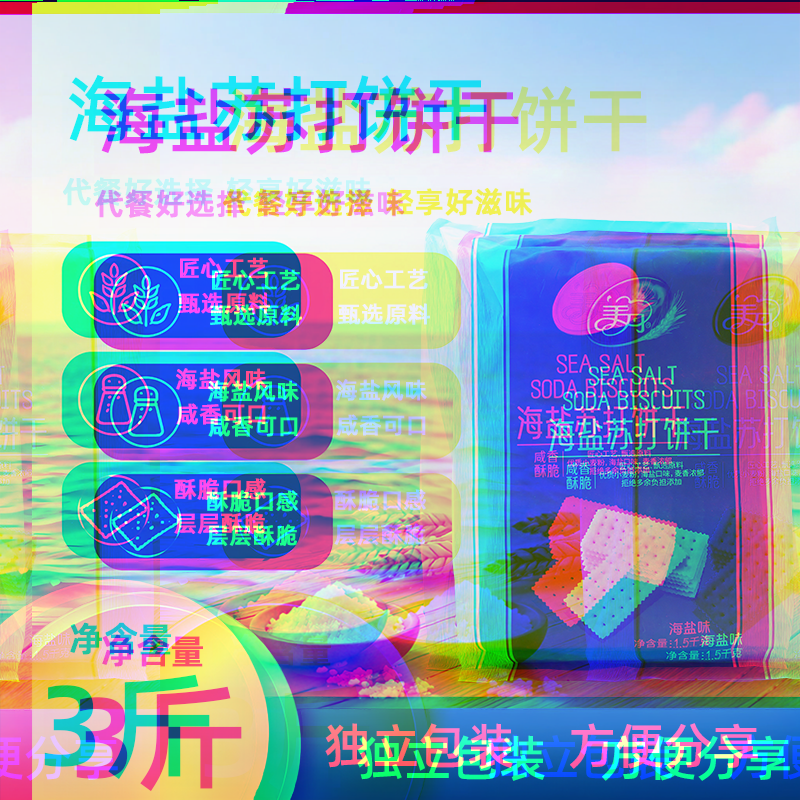
<style>
.page{position:relative;width:800px;height:800px}
.page>*{position:absolute;margin:0}
.t1{font:71.9px "AlibabaPuHuiTi-Medium"}
.t2{font:29.9px "AlibabaPuHuiTi-Medium";font-weight:bold}
.t3{font:29.3px "AlibabaPuHuiTi-Medium";font-weight:bold}
.t4{font:22.8px "AlibabaPuHuiTi-Medium";font-weight:bold}
.t5{font:23.1px "AlibabaPuHuiTi-Medium";font-weight:bold}
.t6{font:34.2px "AlibabaPuHuiTi-Medium";font-weight:bold}
.t7{font:114.2px "AlibabaPuHuiTi-Medium"}
.t8{font:48.5px "AlibabaPuHuiTi-Medium"}
.t9{font:48.8px "AlibabaPuHuiTi-Medium"}
</style>
<div class="page">
<p class="t1" style="left:69px;top:72px;width:418px;height:69px">海盐苏打饼干</p>
<p class="t2" style="left:63px;top:175px;width:150px;height:29px">代餐好选择</p>
<p class="t3" style="left:226px;top:175px;width:147px;height:28px">轻享好滋味</p>
<p class="t4" style="left:180px;top:255px;width:88px;height:22px">匠心工艺</p>
<p class="t5" style="left:178px;top:290px;width:92px;height:22px">甄选原料</p>
<p class="t4" style="left:176px;top:366px;width:91px;height:22px">海盐风味</p>
<p class="t4" style="left:176px;top:401px;width:90px;height:22px">咸香可口</p>
<p class="t5" style="left:174px;top:476px;width:92px;height:22px">酥脆口感</p>
<p class="t6" style="left:70px;top:620px;width:101px;height:33px">净含量</p>
<p class="t7" style="left:44px;top:672px;width:166px;height:106px">3斤</p>
<p class="t8" style="left:325px;top:721px;width:188px;height:46px">独立包装</p>
<p class="t9" style="left:570px;top:721px;width:188px;height:46px">方便分享</p>
</div>
